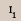
<style>
.page{position:relative;width:21px;height:21px;background:#d9cdc1}
.page>*{position:absolute;margin:0}
.t1{font:9px "Tahoma";color:#000000}
.t2{font:8px "Tahoma";color:#000000}
</style>
<div class="page">
<p class="t1" style="left:9px;top:6px;width:3px;height:7px">I</p>
<p class="t2" style="left:12px;top:12px;width:4px;height:6px">1</p>
</div>
